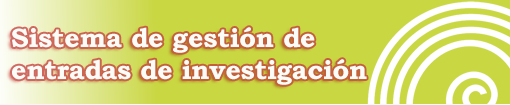
<style>
.page{position:relative;width:510px;height:105px;background:#c9d742}
.page>*{position:absolute;margin:0}
.t1{font:26.7px "BookmanOldStyle-Bold";color:#fbfcf8}
</style>
<div class="page">
<p class="t1" style="left:12px;top:27px;width:355px;height:58px">Sistema de gestión de<br>entradas de investigación</p>
</div>
